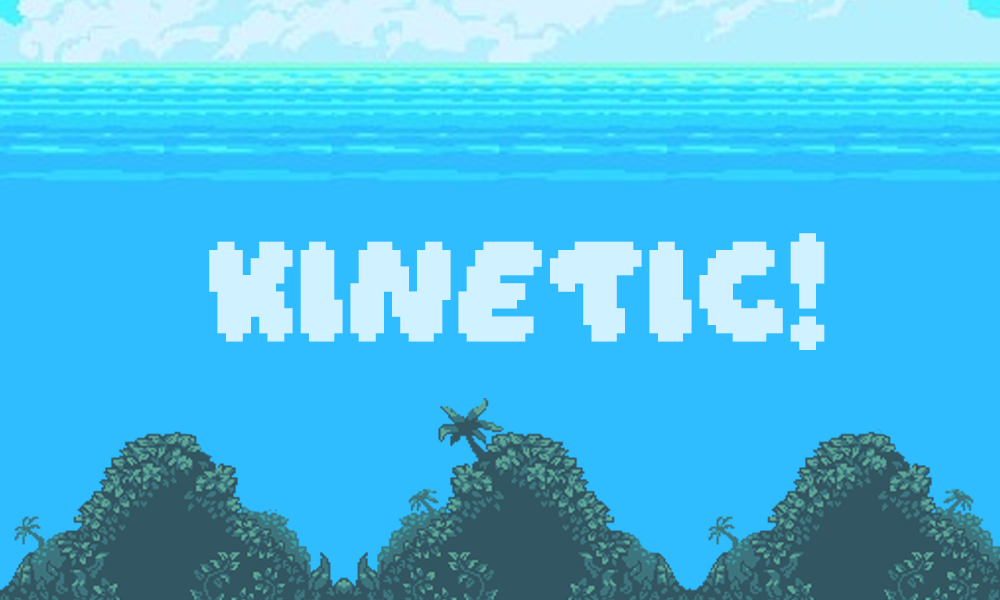
<style>
.page{position:relative;width:1000px;height:600px;background:#2fbdff}
.page>*{position:absolute;margin:0}
.t1{font:88.6px "Daydream";color:#d0f1ff}
</style>
<div class="page">
<p class="t1" style="left:209px;top:233px;width:616px;height:117px">KINETIC!</p>
</div>
